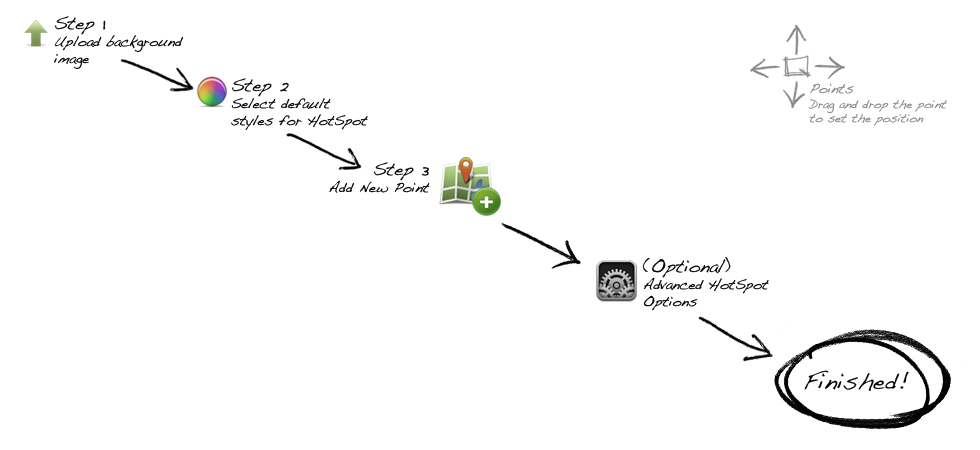
<style>
.page{position:relative;width:980px;height:450px;background:#ffffff}
.page>*{position:absolute;margin:0}
.t1{font:14px "Handwriting-Dakota";color:#000000}
.t2{font:18px "Handwriting-Dakota";color:#000000}
.t3{font:12px "Handwriting-Dakota";color:#888888}
.t4{font:14px "Handwriting-Dakota";color:#888888}
.t5{font:24px "Handwriting-Dakota";color:#000000}
</style>
<div class="page">
<p class="t1" style="left:54px;top:16px;width:130px;height:53px"><span class="t2">Step 1<br></span>Upload background<br>image</p>
<p class="t1" style="left:231px;top:78px;width:137px;height:52px"><span class="t2">Step 2<br></span>Select default <br>styles for HotSpot</p>
<p class="t3" style="left:808px;top:83px;width:139px;height:43px"><span class="t4">Points<br></span>Drag and drop the point<br>to set the position</p>
<p class="t1" style="left:329px;top:162px;width:101px;height:31px;text-align:right"><span class="t2">Step 3<br></span>Add New Point</p>
<p class="t1" style="left:642px;top:256px;width:127px;height:55px"><span class="t2">(Optional)<br></span>Advanced HotSpot<br>Options</p>
<p class="t5" style="left:804px;top:370px;width:105px;height:21px">Finished!</p>
</div>
